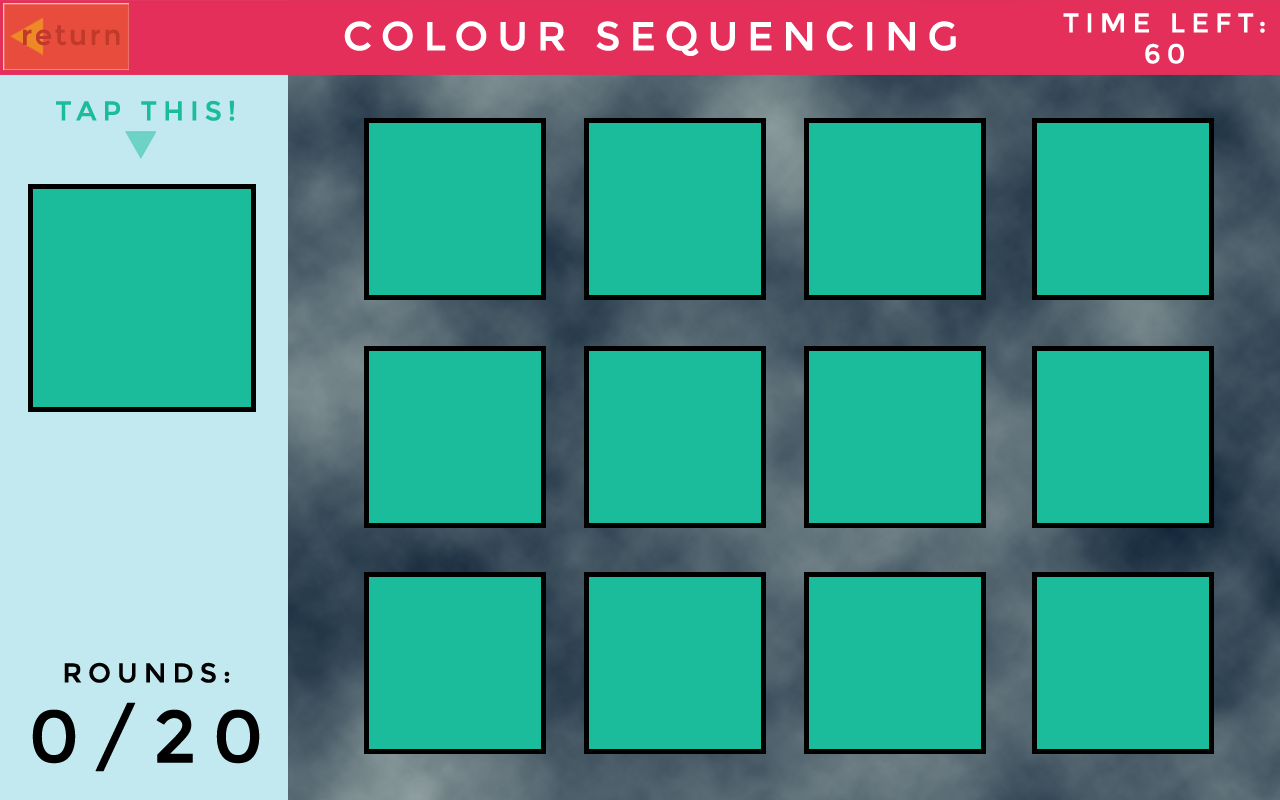
<style>
.page{position:relative;width:1280px;height:800px;background:#1bbc9b}
.page>*{position:absolute;margin:0}
.t1{font:27px/30.9px "Montserrat-Regular";letter-spacing:0.2em;color:#ffffff;text-transform:uppercase;font-weight:bold}
.t2{font:27.6px "Montserrat-Regular";letter-spacing:0.075em;color:#c1392b;font-weight:bold}
.t3{font:40px "Montserrat-Regular";letter-spacing:0.2em;color:#ffffff;text-transform:uppercase;font-weight:bold}
.t4{font:27px "Montserrat-Regular";letter-spacing:0.2em;color:#1bbc9b;text-transform:uppercase;font-weight:bold}
.t5{font:27px/30.9px "Montserrat-Regular";letter-spacing:0.2em;color:#000000;text-transform:uppercase;font-weight:bold}
.t6{font:73px/79.9px "Montserrat-Regular";letter-spacing:0.2em;color:#000000;text-transform:uppercase;font-weight:bold}
</style>
<div class="page">
<p class="t1" style="left:1063px;top:13px;width:202px;height:51px;text-align:center">time Left: <br>60</p>
<p class="t2" style="left:23px;top:25px;width:97px;height:21px">return</p>
<p class="t3" style="left:344px;top:21px;width:612px;height:35px">Colour Sequencing</p>
<p class="t4" style="left:56px;top:100px;width:179px;height:21px">Tap This!</p>
<p class="t5" style="left:32px;top:662px;width:228px;height:110px;text-align:center">Rounds:<br><span class="t6">0/20</span></p>
</div>
